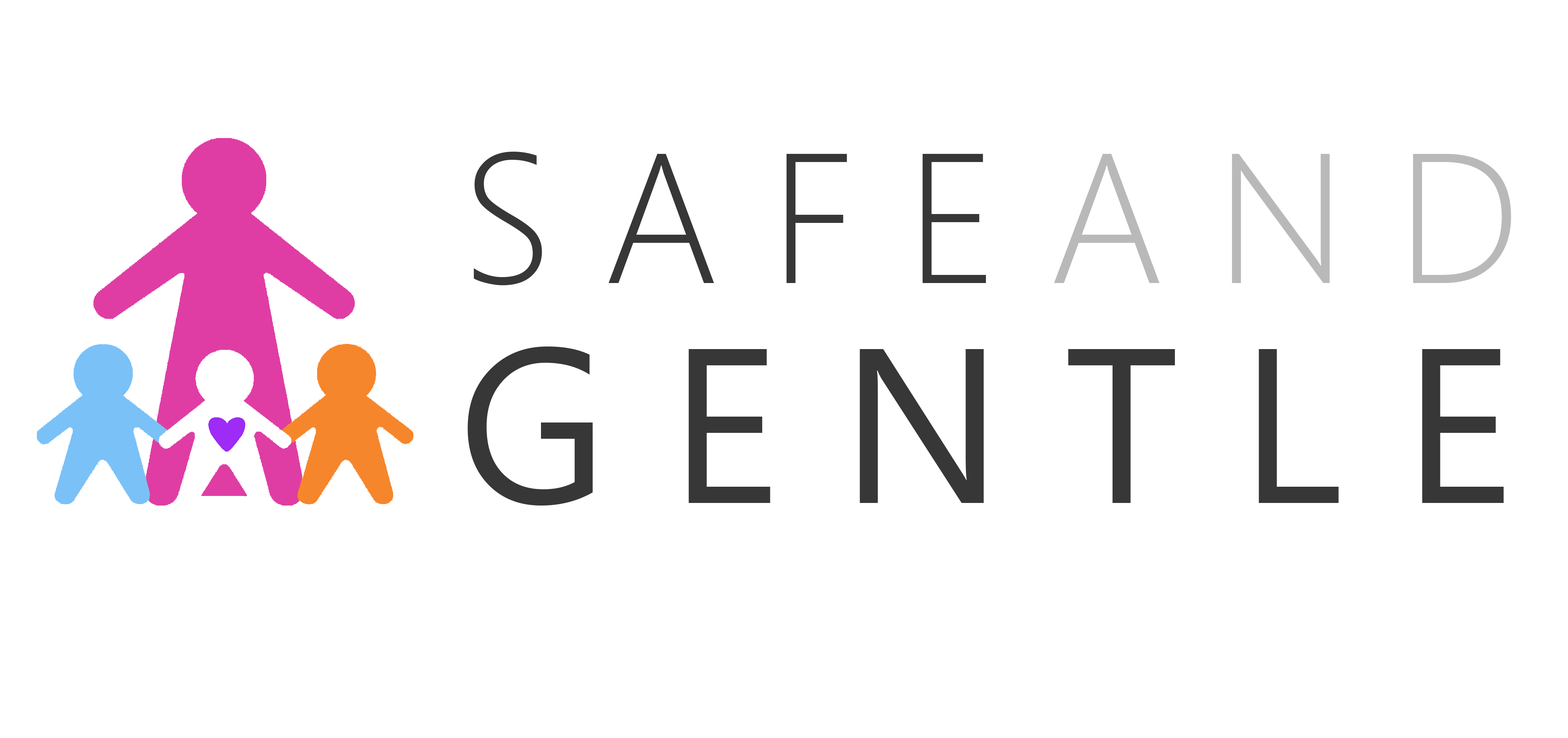
<style>
.page{position:relative;width:1568px;height:738px;background:#ffffff}
.page>*{position:absolute;margin:0}
.t1{font:184.4px "SegoeUI-Light";color:#373737}
.t2{font:184.4px "SegoeUI-Light";color:#b9b9b9}
.t3{font:219.4px "SegoeUI";color:#373737}
</style>
<div class="page">
<p class="t1" style="left:473px;top:152px;width:1038px;height:133px">S A F E <span class="t2">A N D</span></p>
<p class="t3" style="left:468px;top:346px;width:1036px;height:159px">G E N T L E</p>
</div>
